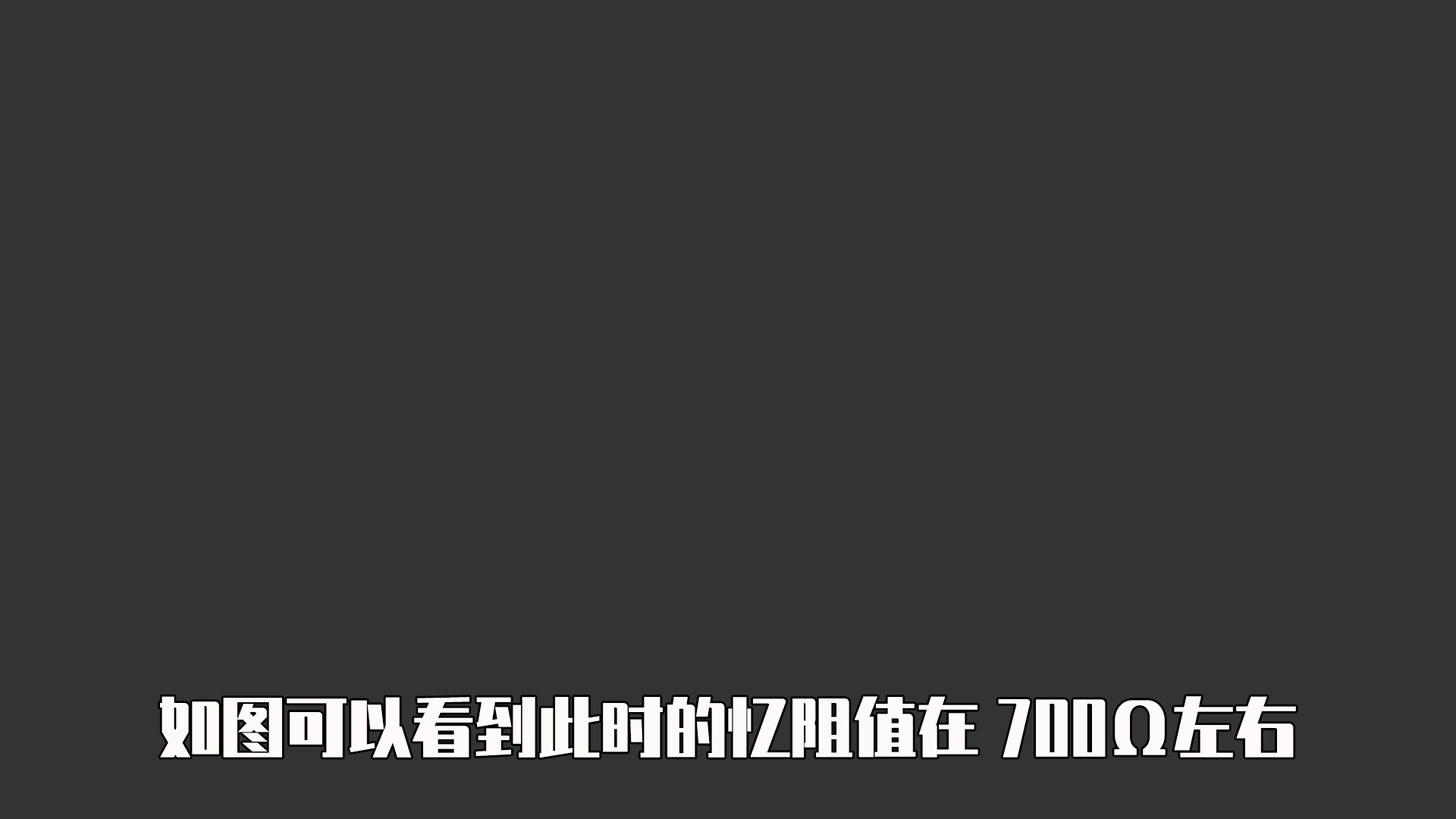
<style>
.page{position:relative;width:1456px;height:819px;background:#333333}
.page>*{position:absolute;margin:0}
.t1{font:63.2px "ZhenyanGB-Regular";color:#fefafa}
</style>
<div class="page">
<p class="t1" style="left:160px;top:696px;width:1136px;height:62px">如图可以看到此时的忆阻值在700Ω左右</p>
</div>
